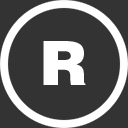
<style>
.page{position:relative;width:128px;height:128px;background:#333333}
.page>*{position:absolute;margin:0}
.t1{font:61px "HelveticaLTStd-Blk";color:#ffffff}
</style>
<div class="page">
<p class="t1" style="left:43px;top:41px;width:43px;height:44px">R</p>
</div>
